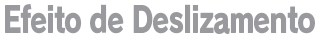
<style>
.page{position:relative;width:320px;height:40px;background:#ffffff}
.page>*{position:absolute;margin:0}
.t1{font:36px "RodinPro-EB";letter-spacing:-0.04em;color:#989a9d;scale:0.76 1}
</style>
<div class="page">
<p class="t1" style="left:5px;top:4px;width:310px;height:30px">Efeito de Deslizamento</p>
</div>
